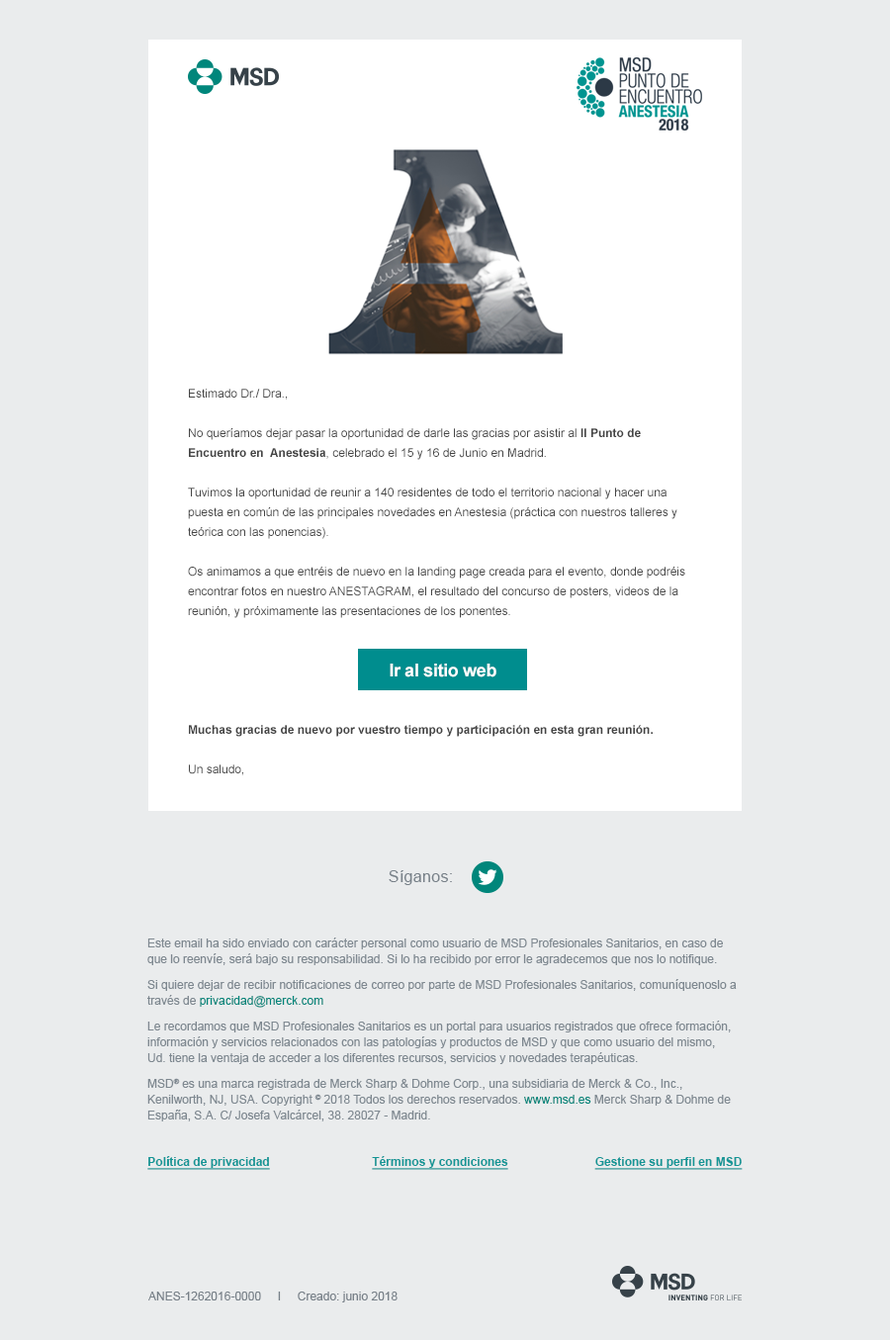
<style>
.page{position:relative;width:890px;height:1340px;background:#eaeced}
.page>*{position:absolute;margin:0}
.t1{font:11.9px/19.8px "ArialMT";color:#444444}
.t2{font:11.9px/19.8px "Arial-BoldMT";color:#444444}
.t3{font:17.8px "Arial-BoldMT";letter-spacing:-0.02em;color:#ffffff}
.t4{font:15.8px "ArialMT";letter-spacing:0.02em;color:#788189}
.t5{font:11.9px/15.8px "ArialMT";color:#7e8890}
.t6{font:11.9px/15.8px "ArialMT";color:#00867b}
.t7{font:11.9px "Arial-BoldMT";color:#139696;text-decoration:underline}
.t8{font:11.9px "ArialMT";color:#778088}
</style>
<div class="page">
<p class="t1" style="left:188px;top:389px;width:497px;height:386px">Estimado Dr./ Dra.,<br><br>No queríamos dejar pasar la oportunidad de darle las gracias por asistir al <span class="t2">II Punto de Encuentro en  Anestesia</span>, celebrado el 15 y 16 de Junio en Madrid.<br><br>Tuvimos la oportunidad de reunir a 140 residentes de todo el territorio nacional y hacer una puesta en común de las principales novedades en Anestesia (práctica con nuestros talleres y teórica con las ponencias).<br><br>Os animamos a que entréis de nuevo en la landing page creada para el evento, donde podréis encontrar fotos en nuestro ANESTAGRAM, el resultado del concurso de posters, videos de la reunión, y próximamente las presentaciones de los ponentes.<br><br><br><br><br><br><span class="t2">Muchas gracias de nuevo por vuestro tiempo y participación en esta gran reunión.<br></span><br>Un saludo,</p>
<p class="t3" style="left:390px;top:664px;width:106px;height:13px">Ir al sitio web</p>
<p class="t4" style="left:389px;top:870px;width:63px;height:15px">Síganos:</p>
<p class="t5" style="left:147px;top:937px;width:590px;height:184px">Este email ha sido enviado con carácter personal como usuario de MSD Profesionales Sanitarios, en caso de que lo reenvíe, será bajo su responsabilidad. Si lo ha recibido por error le agradecemos que nos lo notifique. <br>Si quiere dejar de recibir notificaciones de correo por parte de MSD Profesionales Sanitarios, comuníquenoslo a través de <span class="t6">privacidad@merck.com</span> <br>Le recordamos que MSD Profesionales Sanitarios es un portal para usuarios registrados que ofrece formación, información y servicios relacionados con las patologías y productos de MSD y que como usuario del mismo,<br>Ud. tiene la ventaja de acceder a los diferentes recursos, servicios y novedades terapéuticas. <br>MSD® es una marca registrada de Merck Sharp &amp; Dohme Corp., una subsidiaria de Merck &amp; Co., Inc., Kenilworth, NJ, USA. Copyright © 2018 Todos los derechos reservados. <span class="t6">www.msd.es</span> Merck Sharp &amp; Dohme de España, S.A. C/ Josefa Valcárcel, 38. 28027 - Madrid.</p>
<p class="t7" style="left:147px;top:1156px;width:123px;height:14px">Política de privacidad</p>
<p class="t7" style="left:372px;top:1156px;width:136px;height:14px">Términos y condiciones</p>
<p class="t7" style="left:594px;top:1157px;width:149px;height:13px">Gestione su perfil en MSD</p>
<p class="t8" style="left:148px;top:1291px;width:250px;height:11px">ANES-1262016-0000     I     Creado: junio 2018</p>
</div>
